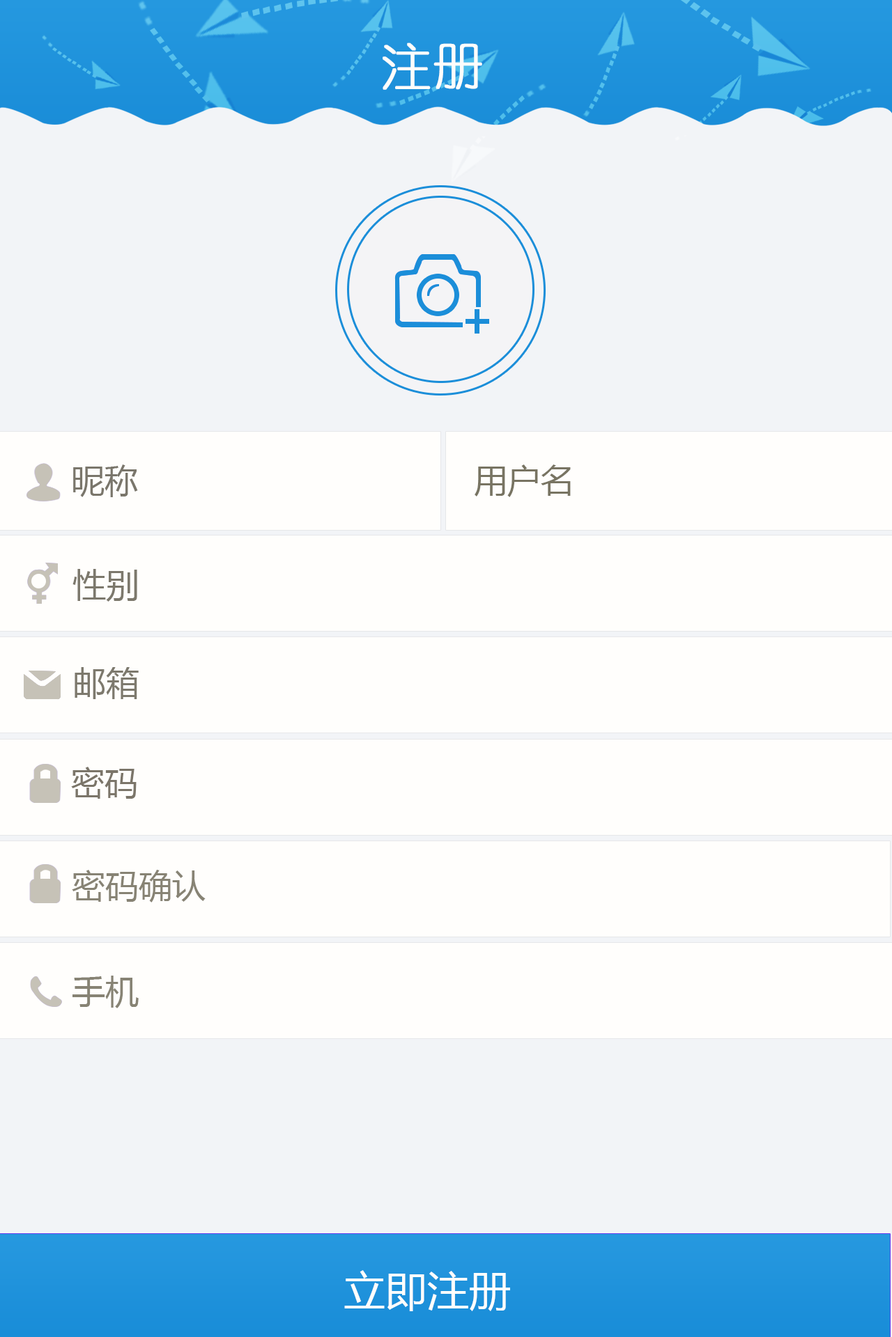
<style>
.page{position:relative;width:892px;height:1337px;background:#fffefc}
.page>*{position:absolute;margin:0}
.t1{font:50.2px "YouYuan";color:#fefdfb;font-weight:bold}
.t2{font:33.4px "MicrosoftYaHei";color:#7a766b}
.t3{font:33.4px "MicrosoftYaHei";color:#787462}
.t4{font:33.4px "MicrosoftYaHei";color:#7b786c}
.t5{font:33.4px "MicrosoftYaHei";color:#7d796d}
.t6{font:33.4px "MicrosoftYaHei";color:#7b7569}
.t7{font:33.4px "MicrosoftYaHei";color:#878473}
.t8{font:33.4px "MicrosoftYaHei";color:#878374}
.t9{font:41.8px "MicrosoftYaHei";color:#fffefc}
</style>
<div class="page">
<p class="t1" style="left:382px;top:42px;width:100px;height:48px">注册</p>
<p class="t2" style="left:73px;top:465px;width:65px;height:32px">昵称</p>
<p class="t3" style="left:474px;top:465px;width:96px;height:32px">用户名</p>
<p class="t4" style="left:72px;top:569px;width:65px;height:33px">性别</p>
<p class="t5" style="left:75px;top:667px;width:64px;height:32px">邮箱</p>
<p class="t6" style="left:71px;top:767px;width:66px;height:32px">密码</p>
<p class="t7" style="left:72px;top:870px;width:133px;height:33px">密码确认</p>
<p class="t8" style="left:72px;top:976px;width:67px;height:33px">手机</p>
<p class="t9" style="left:344px;top:1271px;width:166px;height:41px">立即注册</p>
</div>
